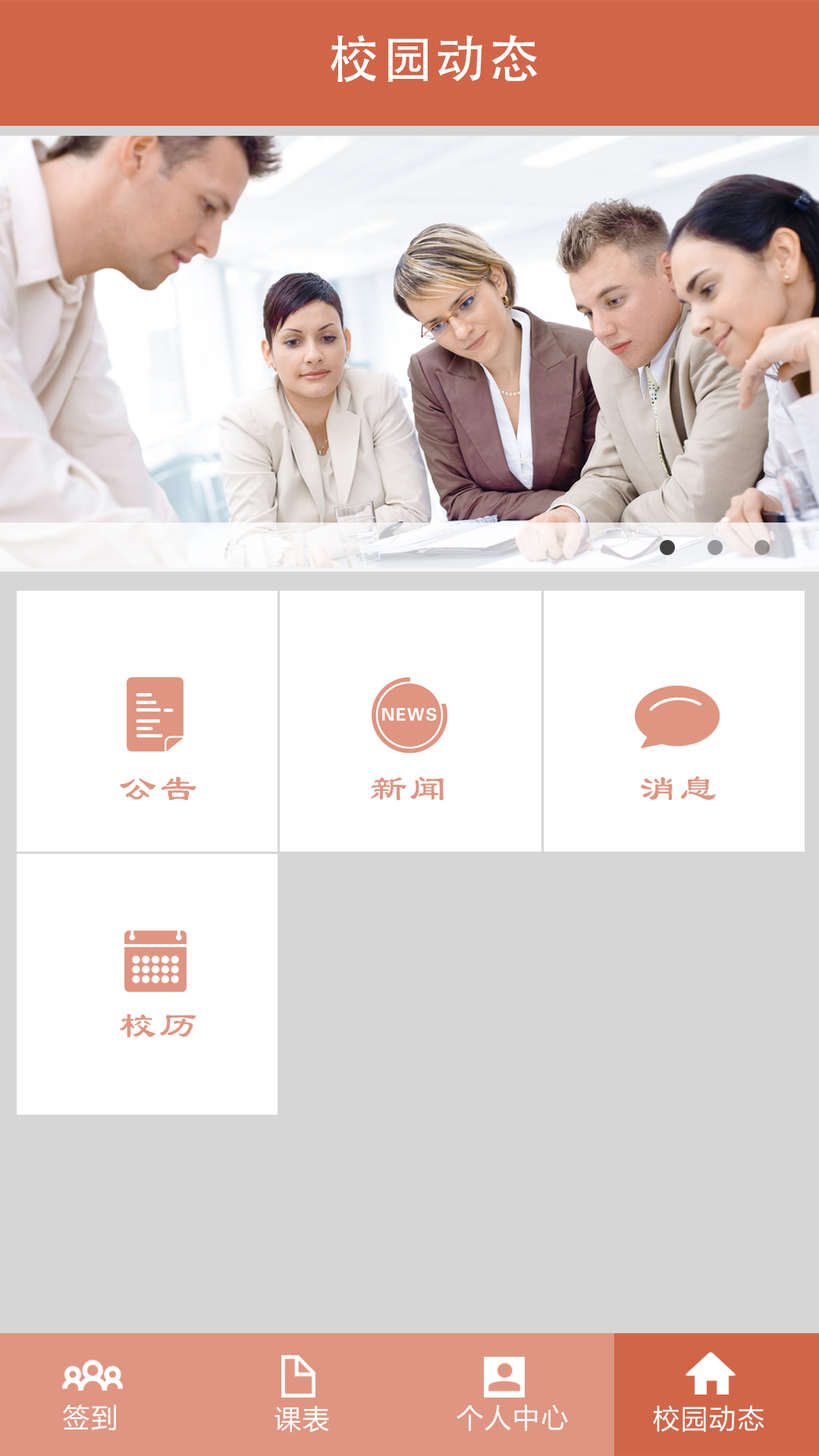
<style>
.page{position:relative;width:819px;height:1456px;background:#d6d6d6}
.page>*{position:absolute;margin:0}
.t1{font:50.8px "AdobeHeitiStd-Regular";letter-spacing:0.06em;color:#ffffff}
.t2{font:37.9px "LiSu";letter-spacing:0.06em;color:#df9581}
.t3{font:26.9px "MicrosoftYaHei";letter-spacing:0.06em;color:#ffffff}
</style>
<div class="page">
<p class="t1" style="left:331px;top:35px;width:206px;height:48px">校园动态</p>
<p class="t2" style="left:120px;top:777px;width:76px;height:24px">公告</p>
<p class="t2" style="left:371px;top:777px;width:73px;height:24px">新闻</p>
<p class="t2" style="left:641px;top:776px;width:75px;height:25px">消息</p>
<p class="t2" style="left:120px;top:1014px;width:76px;height:23px">校历</p>
<p class="t3" style="left:63px;top:1404px;width:53px;height:26px">签到</p>
<p class="t3" style="left:275px;top:1406px;width:54px;height:26px">课表</p>
<p class="t3" style="left:457px;top:1404px;width:111px;height:27px">个人中心</p>
<p class="t3" style="left:653px;top:1405px;width:111px;height:27px">校园动态</p>
</div>
